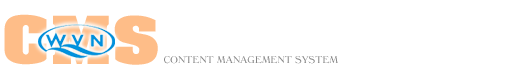
<style>
.page{position:relative;width:519px;height:66px;background:#ffffff}
.page>*{position:absolute;margin:0}
.t1{font:74px "VNI-Auchon-Bold";scale:1.17 1}
.t2{font:10px "VN-Windsor-Normal";letter-spacing:0.035em;color:#848484}
</style>
<div class="page">
<p class="t1" style="left:4px;top:14px;width:154px;height:51px">CMS</p>
<p class="t2" style="left:164px;top:56px;width:174px;height:8px">CONTENT MANAGEMENT SYSTEM</p>
</div>
